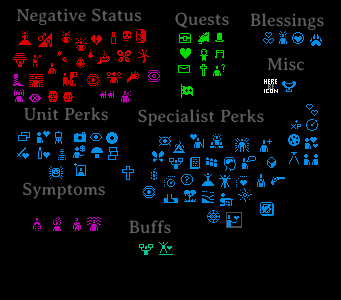
<style>
.page{position:relative;width:341px;height:300px;background:#000000}
.page>*{position:absolute;margin:0}
.t1{font:18px "AveriaSerif-Regular";color:#5d5d5d}
</style>
<div class="page">
<p class="t1" style="left:17px;top:8px;width:125px;height:18px">Negative Status</p>
<p class="t1" style="left:175px;top:12px;width:54px;height:16px">Quests</p>
<p class="t1" style="left:250px;top:13px;width:74px;height:18px">Blessings</p>
<p class="t1" style="left:268px;top:57px;width:36px;height:14px">Misc</p>
<p class="t1" style="left:24px;top:107px;width:84px;height:14px">Unit Perks</p>
<p class="t1" style="left:138px;top:109px;width:126px;height:17px">Specialist Perks</p>
<p class="t1" style="left:23px;top:182px;width:82px;height:17px">Symptoms</p>
<p class="t1" style="left:129px;top:220px;width:42px;height:14px">Buffs</p>
</div>
